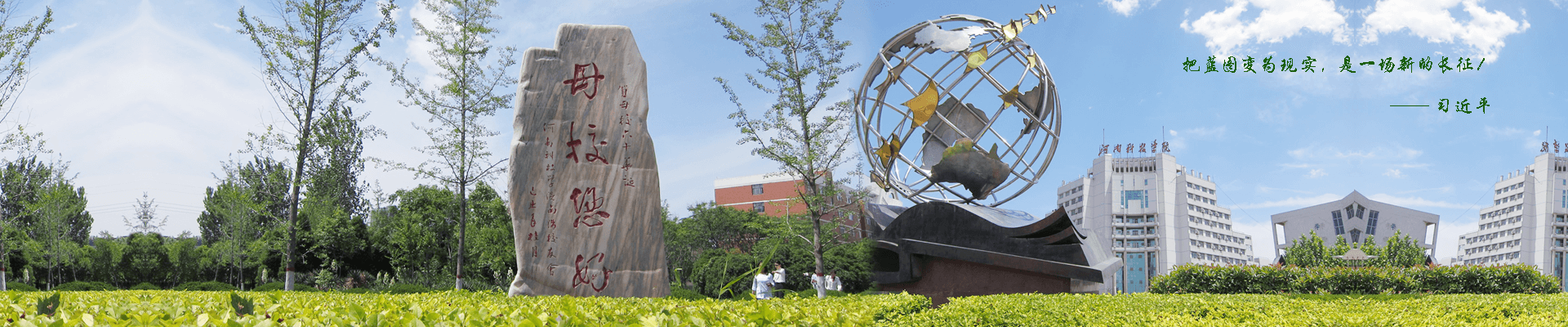
<style>
.page{position:relative;width:1568px;height:327px}
.page>*{position:absolute;margin:0}
.t1{font:19.6px "STXingkai";color:#1c5e0d}
</style>
<div class="page">
<p class="t1" style="left:1183px;top:56px;width:302px;height:18px">把蓝图变为现实，是一场新的长征！</p>
<p class="t1" style="left:1390px;top:97px;width:100px;height:17px">—— 习近平</p>
</div>
